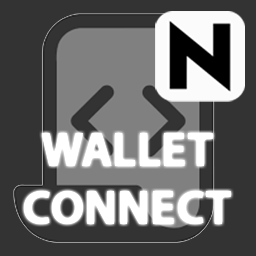
<style>
.page{position:relative;width:256px;height:256px;background:#333333}
.page>*{position:absolute;margin:0}
.t1{font:48px "MyriadPro-Bold";color:#ffffff}
</style>
<div class="page">
<p class="t1" style="left:24px;top:133px;width:207px;height:91px;text-align:center">WALLET<br>CONNECT</p>
</div>
